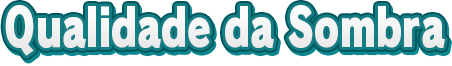
<style>
.page{position:relative;width:452px;height:66px;background:#ffffff}
.page>*{position:absolute;margin:0}
.t1{font:52px "RodinPro-UB";letter-spacing:-0.003em;color:#f1f2f2;scale:0.73 1}
</style>
<div class="page">
<p class="t1" style="left:5px;top:5px;width:440px;height:51px">Qualidade da Sombra</p>
</div>
